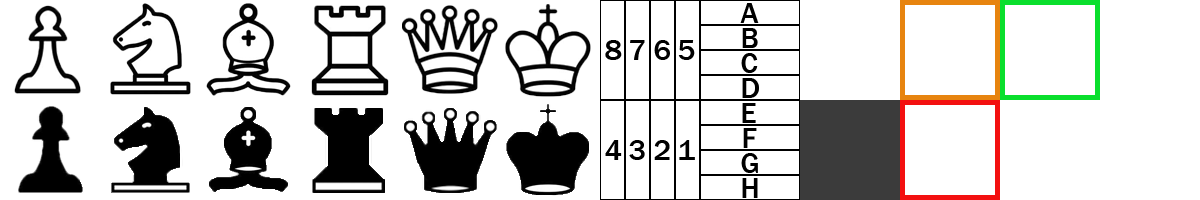
<style>
.page{position:relative;width:1200px;height:200px;background:#ffffff}
.page>*{position:absolute;margin:0}
.t1{font:30px "FranklinGothic-Medium";color:#000000}
</style>
<div class="page">
<p class="t1" style="left:740px;top:3px;width:19px;height:20px">A</p>
<p class="t1" style="left:742px;top:28px;width:16px;height:20px">B</p>
<p class="t1" style="left:605px;top:40px;width:17px;height:20px">8</p>
<p class="t1" style="left:630px;top:40px;width:15px;height:20px">7</p>
<p class="t1" style="left:654px;top:40px;width:16px;height:20px">6</p>
<p class="t1" style="left:678px;top:40px;width:17px;height:20px">5</p>
<p class="t1" style="left:741px;top:53px;width:17px;height:20px">C</p>
<p class="t1" style="left:742px;top:78px;width:17px;height:20px">D</p>
<p class="t1" style="left:742px;top:103px;width:14px;height:20px">E</p>
<p class="t1" style="left:743px;top:128px;width:14px;height:20px">F</p>
<p class="t1" style="left:605px;top:140px;width:17px;height:20px">4</p>
<p class="t1" style="left:629px;top:140px;width:16px;height:20px">3</p>
<p class="t1" style="left:654px;top:140px;width:16px;height:20px">2</p>
<p class="t1" style="left:679px;top:140px;width:16px;height:20px">1</p>
<p class="t1" style="left:741px;top:153px;width:17px;height:20px">G</p>
<p class="t1" style="left:742px;top:178px;width:16px;height:20px">H</p>
</div>
